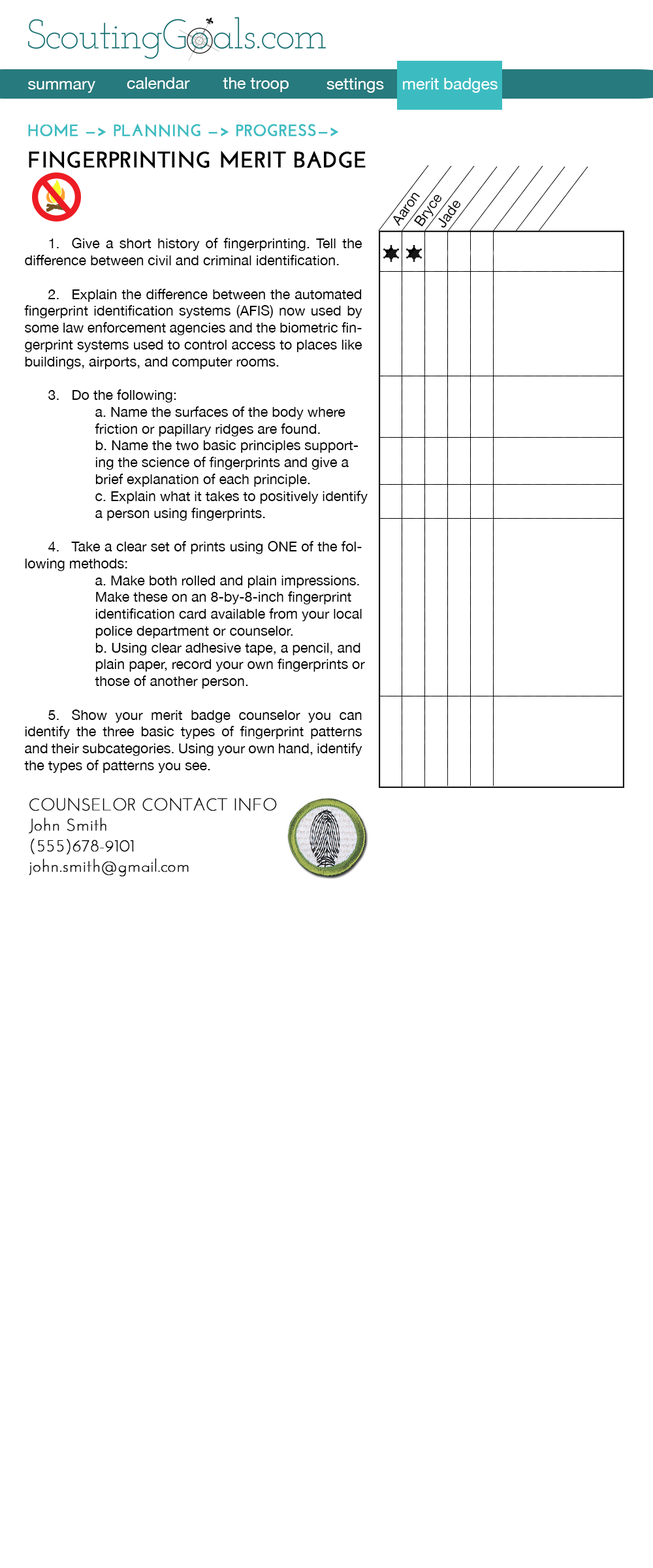
<style>
.page{position:relative;width:653px;height:1568px;background:#ffffff}
.page>*{position:absolute;margin:0}
.t1{font:16.3px "HelveticaNeue";color:#ffffff}
.t2{font:16.3px/15.9px "JosefinSans-Bold";color:#3cbcc1;text-transform:uppercase;font-weight:bold}
.t3{font:22.2px/15.9px "JosefinSans-Bold";color:#000000;text-transform:uppercase;font-weight:bold}
.t4{font:14px/19.1px "HelveticaNeue";color:#000000}
.t5{font:14px "HelveticaNeue";color:#000000}
.t6{font:17.1px "JosefinSans-Light";color:#000000;font-weight:bold}
</style>
<div class="page">
<p class="t1" style="left:127px;top:77px;width:63px;height:12px">calendar</p>
<p class="t1" style="left:223px;top:77px;width:66px;height:15px">the troop</p>
<p class="t1" style="left:327px;top:78px;width:57px;height:15px">settings</p>
<p class="t1" style="left:403px;top:78px;width:95px;height:15px">merit badges</p>
<p class="t1" style="left:28px;top:81px;width:67px;height:12px">summary</p>
<p class="t2" style="left:28px;top:123px;width:338px;height:46px;text-align:justify">Home —&gt; planning —&gt; progress—&gt;<br><span class="t3"><br>Fingerprinting Merit Badge</span></p>
<p class="t4" style="left:393px;top:193px;width:68px;height:35px;text-align:justify;rotate:-55deg">Aaron<br>   Bryce<br>      Jade</p>
<p class="t5" style="left:24px;top:238px;width:344px;height:535px;text-align:justify">1. Give a short history of fingerprinting. Tell the difference between civil and criminal identification.<br><br> 2. Explain the difference between the automated fingerprint identification systems (AFIS) now used by some law enforcement agencies and the biometric fingerprint systems used to control access to places like buildings, airports, and computer rooms.<br><br> 3. Do the following: <br>   a. Name the surfaces of the body where      friction or papillary ridges are found. <br>   b. Name the two basic principles support-    ing the science of fingerprints and give a      brief explanation of each principle. <br>   c. Explain what it takes to positively identify     a person using fingerprints. <br><br> 4. Take a clear set of prints using ONE of the following methods: <br>   a. Make both rolled and plain impressions.     Make these on an 8-by-8-inch fingerprint     identification card available from your local     police department or counselor. <br>   b. Using clear adhesive tape, a pencil, and     plain paper, record your own fingerprints or     those of another person. <br><br> 5. Show your merit badge counselor you can identify the three basic types of fingerprint patterns and their subcategories. Using your own hand, identify the types of patterns you see.</p>
<p class="t6" style="left:29px;top:797px;width:248px;height:80px;text-align:justify">COUNSELOR CONTACT INFO<br>John Smith<br>(555)678-9101<br>john.smith@gmail.com</p>
</div>
